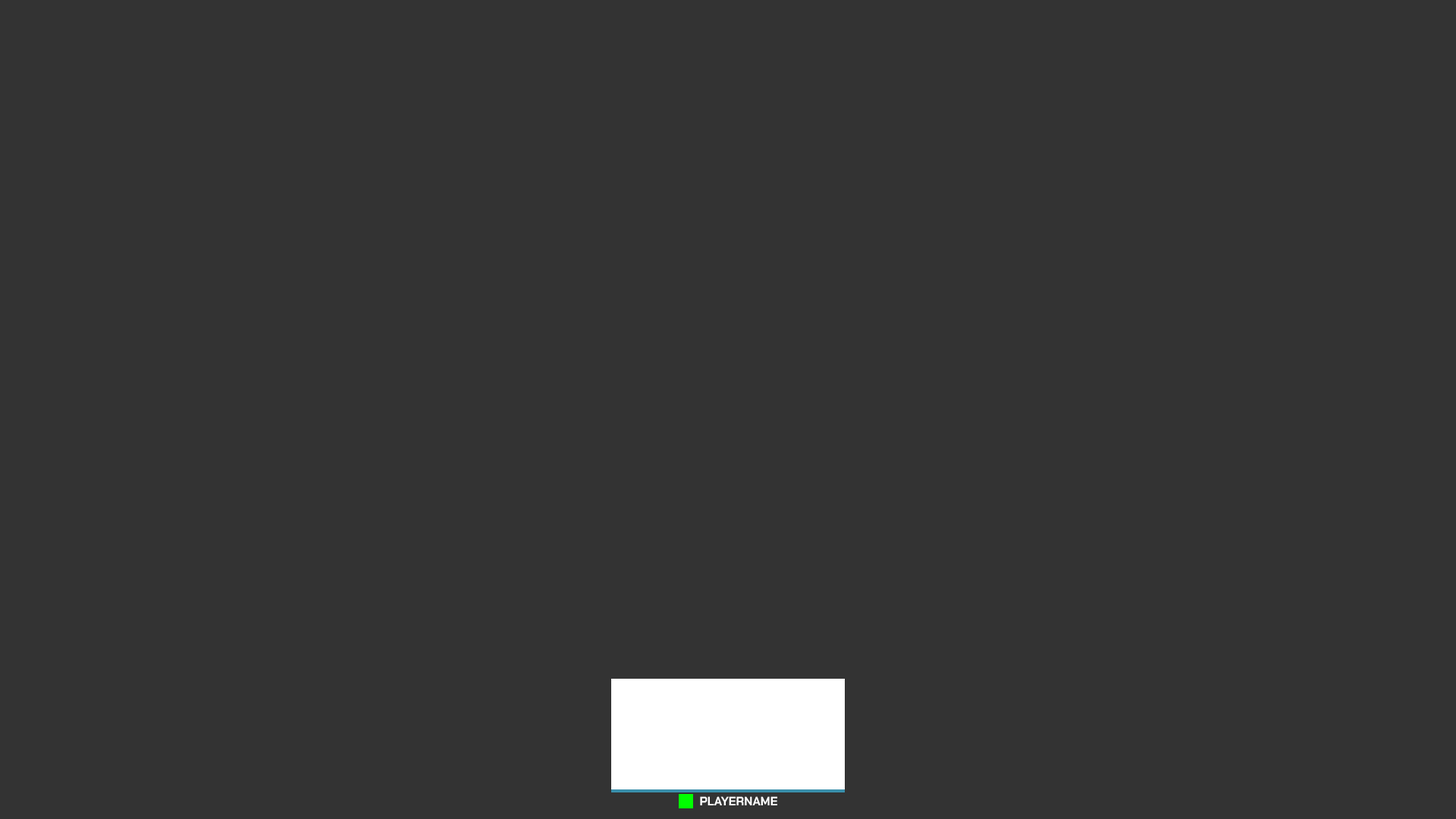
<style>
.page{position:relative;width:1456px;height:819px;background:#333333}
.page>*{position:absolute;margin:0}
.t1{font:12.1px "ChakraPetch-Bold";color:#ffffff;text-transform:uppercase}
</style>
<div class="page">
<p class="t1" style="left:700px;top:796px;width:77px;height:9px">PLAYERNAME</p>
</div>
